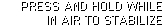
<style>
.page{position:relative;width:163px;height:26px;background:#ffffff}
.page>*{position:absolute;margin:0}
.t1{font:12px "Geneva";color:#000000}
</style>
<div class="page">
<p class="t1" style="left:22px;top:2px;width:140px;height:23px;text-align:right">PRESS AND HOLD WHILE<br>IN AIR TO STABILIZE</p>
</div>
